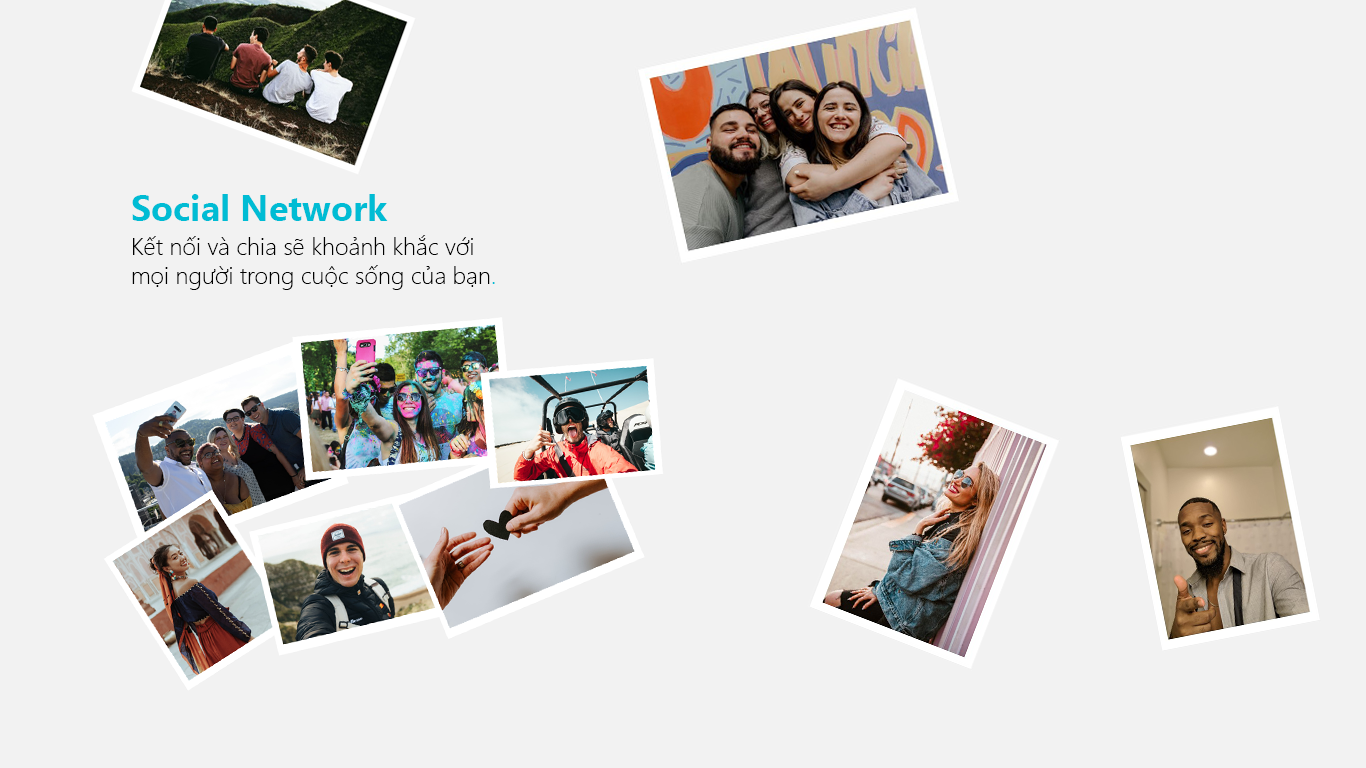
<style>
.page{position:relative;width:1366px;height:768px;background:#f2f2f2}
.page>*{position:absolute;margin:0}
.t1{font:36px "SegoeUI-Bold";color:#00bcd4}
.t2{font:24px "SegoeUI-Light";color:#000000}
.t3{font:24px "SegoeUI-Light";color:#00bcd4}
</style>
<div class="page">
<p class="t1" style="left:132px;top:194px;width:256px;height:27px">Social Network</p>
<p class="t2" style="left:132px;top:235px;width:363px;height:55px">Kết nối và chia sẽ khoảnh khắc với<br>mọi người trong cuộc sống của bạn<span class="t3">.</span></p>
</div>
